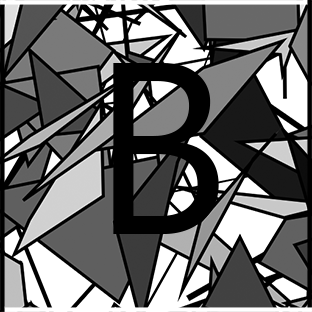
<style>
.page{position:relative;width:312px;height:312px;background:#000000}
.page>*{position:absolute;margin:0}
.t1{font:243.8px "Gadugi";color:#000000}
</style>
<div class="page">
<p class="t1" style="left:113px;top:63px;width:106px;height:171px">B</p>
</div>
